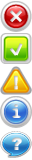
<style>
.page{position:relative;width:32px;height:160px;background:#ffffff}
.page>*{position:absolute;margin:0}
.t1{font:18.2px "Arial-Black";letter-spacing:0.1em;color:#e6e6e6;font-weight:bold;scale:0.77 1}
.t2{font:16.8px "OCRAStd";letter-spacing:0.1em;font-weight:bold;scale:1.25 1}
.t3{font:16.8px "Arial-Black";letter-spacing:0.1em;scale:1.08 1}
</style>
<div class="page">
<p class="t1" style="left:14px;top:75px;width:4px;height:15px">!</p>
<p class="t2" style="left:12px;top:104px;width:9px;height:14px">i</p>
<p class="t3" style="left:11px;top:137px;width:11px;height:13px">?</p>
</div>
